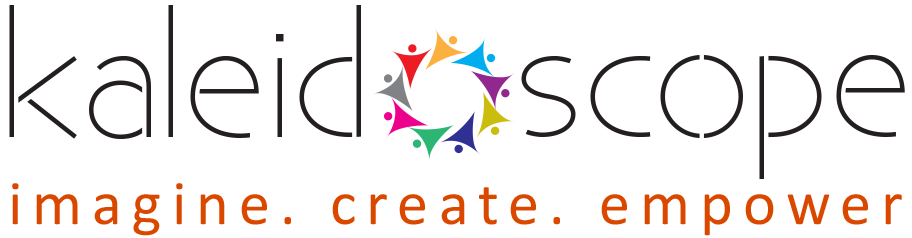
<style>
.page{position:relative;width:912px;height:238px;background:#ffffff}
.page>*{position:absolute;margin:0}
.t1{font:63.2px "Calibri";letter-spacing:0.16em;color:#da4800}
</style>
<div class="page">
<p class="t1" style="left:12px;top:183px;width:890px;height:53px">imagine. create. empower</p>
</div>
